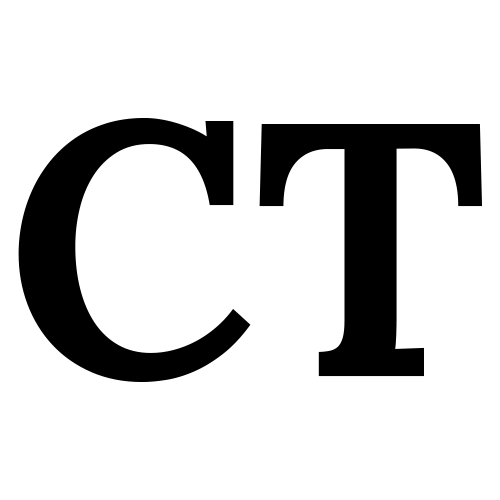
<style>
.page{position:relative;width:500px;height:500px;background:#ffffff}
.page>*{position:absolute;margin:0}
.t1{font:360px "Lora-Bold";color:#000000}
</style>
<div class="page">
<p class="t1" style="left:18px;top:118px;width:464px;height:264px">CT</p>
</div>
